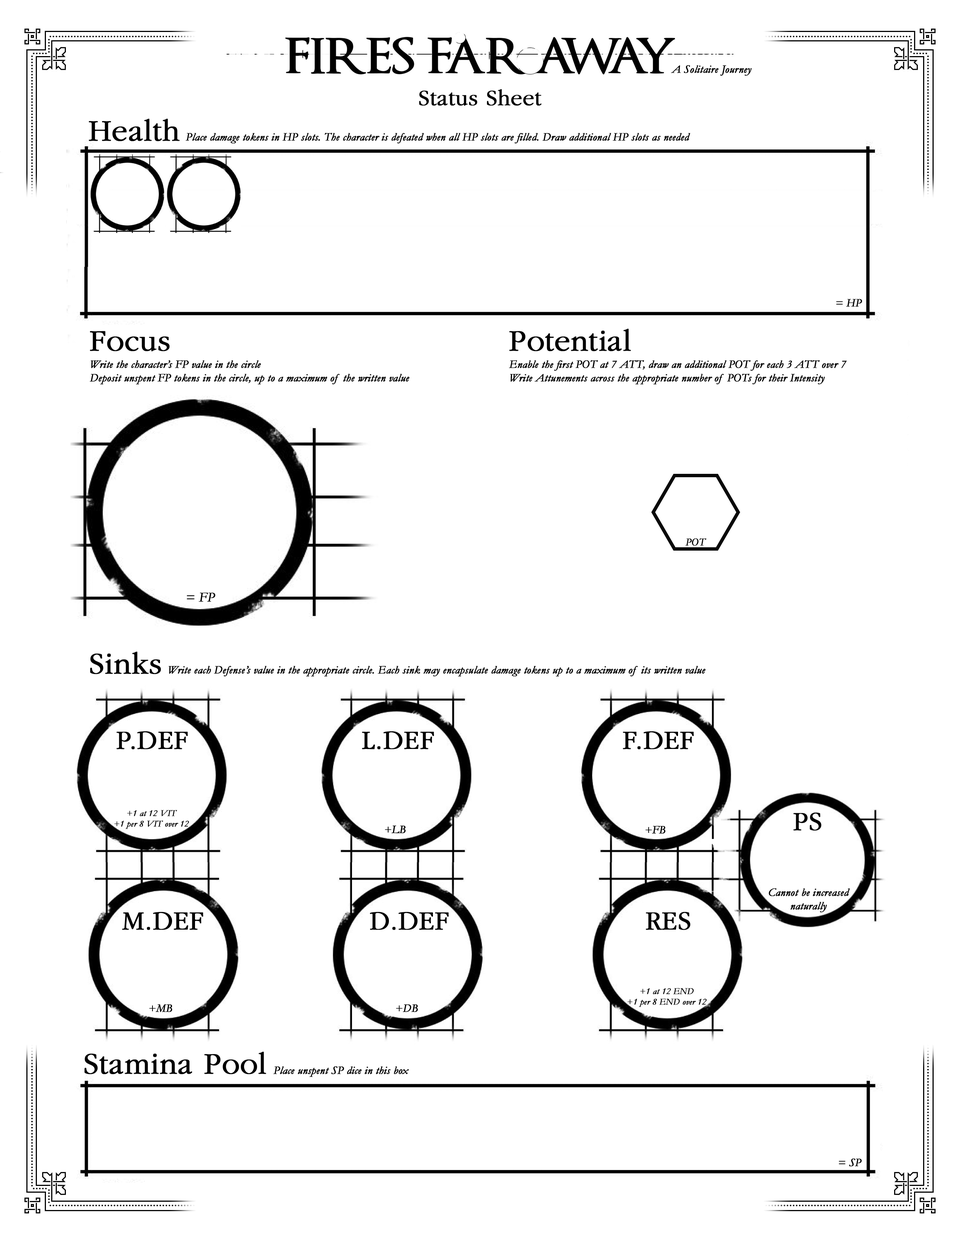
<style>
.page{position:relative;width:960px;height:1242px;background:#ffffff}
.page>*{position:absolute;margin:0}
.t1{font:11.3px "Garamond-Italic";color:#010101;font-weight:bold}
.t2{font:22.6px "Garamond";color:#000000;font-weight:bold}
.t3{font:30.9px "Garamond";color:#000000;font-weight:bold}
.t4{font:11.3px "Garamond-Italic";color:#000000;font-weight:bold}
.t5{font:10.5px "Garamond-Italic";color:#000000;font-weight:bold}
.t6{font:13.6px "Garamond-Italic";color:#000000;font-weight:bold}
.t7{font:27.1px "Garamond";color:#000000;font-weight:bold}
.t8{font:9px "Garamond-Italic";color:#000000;font-weight:bold}
</style>
<div class="page">
<p class="t1" style="left:671px;top:65px;width:81px;height:11px">A Solitaire Journey</p>
<p class="t2" style="left:419px;top:89px;width:123px;height:17px">Status Sheet</p>
<p class="t3" style="left:89px;top:119px;width:91px;height:22px">Health</p>
<p class="t4" style="left:186px;top:133px;width:504px;height:10px">Place damage tokens in HP slots. The character is defeated when all HP slots are filled. Draw additional HP slots as needed</p>
<p class="t4" style="left:836px;top:299px;width:26px;height:8px">= HP</p>
<p class="t3" style="left:509px;top:329px;width:122px;height:22px">Potential</p>
<p class="t3" style="left:90px;top:331px;width:80px;height:21px">Focus</p>
<p class="t4" style="left:90px;top:360px;width:320px;height:25px">Write the character’s FP value in the circle<br>Deposit unspent FP tokens in the circle, up to a maximum of the written value</p>
<p class="t4" style="left:509px;top:360px;width:338px;height:25px">Enable the first POT at 7 ATT, draw an additional POT for each 3 ATT over 7<br>Write Attunements across the appropriate number of POTs for their Intensity</p>
<p class="t5" style="left:685px;top:538px;width:21px;height:8px">POT</p>
<p class="t6" style="left:187px;top:593px;width:28px;height:9px">= FP</p>
<p class="t3" style="left:90px;top:652px;width:71px;height:22px">Sinks</p>
<p class="t4" style="left:169px;top:666px;width:536px;height:11px">Write each Defense’s value in the appropriate circle. Each sink may encapsulate damage tokens up to a maximum of its written value</p>
<p class="t7" style="left:116px;top:731px;width:72px;height:18px">P.DEF</p>
<p class="t7" style="left:362px;top:731px;width:72px;height:18px">L.DEF</p>
<p class="t7" style="left:623px;top:731px;width:71px;height:18px">F.DEF</p>
<p class="t8" style="left:114px;top:810px;width:75px;height:19px;text-align:center">+1 at 12 VIT<br>+1 per 8 VIT over 12</p>
<p class="t7" style="left:793px;top:813px;width:28px;height:18px">PS</p>
<p class="t4" style="left:385px;top:826px;width:21px;height:7px">+LB</p>
<p class="t4" style="left:645px;top:826px;width:21px;height:8px">+FB</p>
<p class="t4" style="left:769px;top:888px;width:81px;height:24px;text-align:center">Cannot be increased<br>naturally</p>
<p class="t7" style="left:122px;top:912px;width:81px;height:18px">M.DEF</p>
<p class="t7" style="left:370px;top:912px;width:79px;height:18px">D.DEF</p>
<p class="t7" style="left:646px;top:912px;width:44px;height:18px">RES</p>
<p class="t8" style="left:628px;top:988px;width:79px;height:19px;text-align:center">+1 at 12 END<br>+1 per 8 END over 12</p>
<p class="t4" style="left:149px;top:1004px;width:23px;height:8px">+MB</p>
<p class="t4" style="left:396px;top:1004px;width:22px;height:8px">+DB</p>
<p class="t3" style="left:84px;top:1052px;width:182px;height:22px">Stamina Pool</p>
<p class="t4" style="left:273px;top:1066px;width:136px;height:11px">Place unspent SP dice in this box</p>
<p class="t4" style="left:839px;top:1159px;width:23px;height:8px">= SP</p>
</div>
